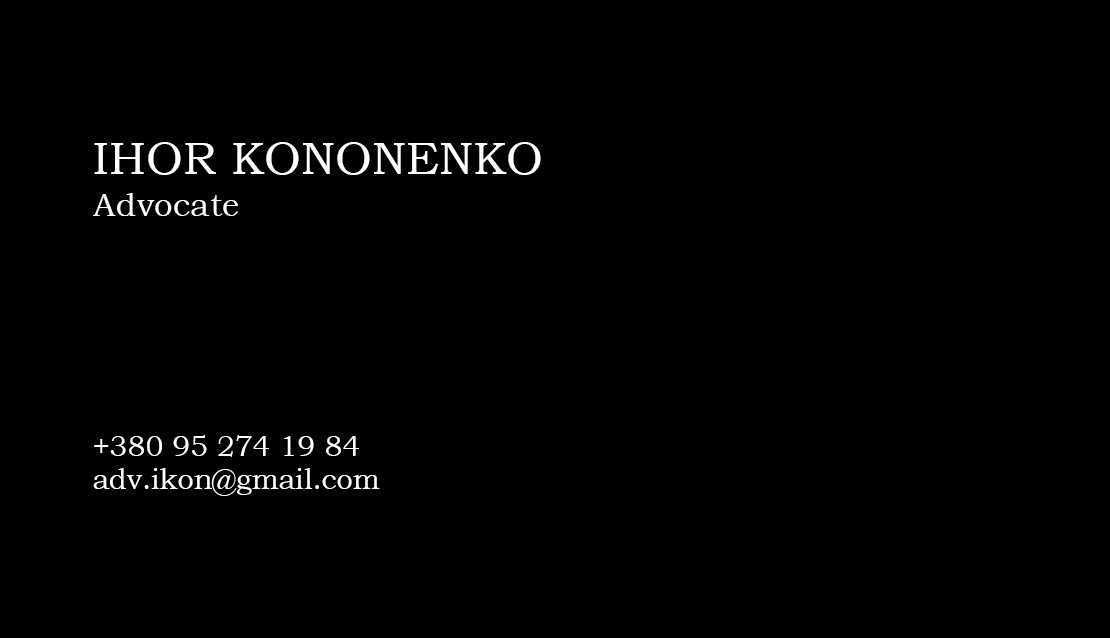
<style>
.page{position:relative;width:1110px;height:638px;background:#000000}
.page>*{position:absolute;margin:0}
.t1{font:46px/41.7px "BookmanOldStyle";color:#ffffff;text-transform:uppercase}
.t2{font:46px/41.7px "BookmanOldStyle";color:#ffffff}
.t3{font:33.3px/41.7px "BookmanOldStyle";color:#ffffff}
.t4{font:28.7px/33.3px "BookmanOldStyle";color:#ffffff}
</style>
<div class="page">
<p class="t1" style="left:93px;top:142px;width:448px;height:74px"><span class="t2">I</span>hor Kononenko<br><span class="t3">Advocate</span></p>
<p class="t4" style="left:93px;top:435px;width:287px;height:61px">+380 95 274 19 84<br>adv.ikon@gmail.com</p>
</div>
